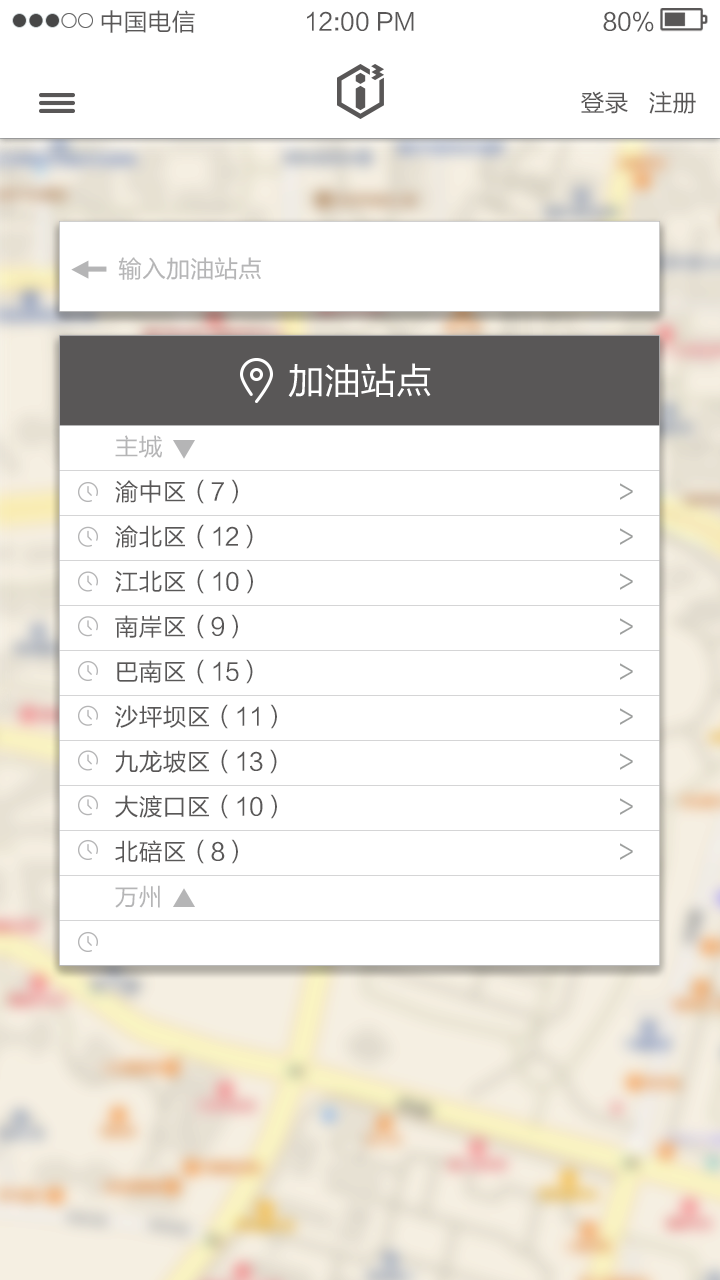
<style>
.page{position:relative;width:720px;height:1280px;background:#ffffff}
.page>*{position:absolute;margin:0}
.t1{font:24px "FZLTHK--GBK1-0";color:#595757}
.t2{font:24px/45px "FZLTHK--GBK1-0";color:#595757}
.t3{font:24px/45px "FZLTHK--GBK1-0";color:#b5b5b6}
.t4{font:24px/45px "FZLTHK--GBK1-0";color:#9d9f9e}
</style>
<div class="page">
<p class="t1" style="left:101px;top:10px;width:94px;height:23px">中国电信</p>
<p class="t1" style="left:307px;top:11px;width:107px;height:20px">12:00 PM</p>
<p class="t1" style="left:603px;top:11px;width:51px;height:21px">80%</p>
<p class="t1" style="left:581px;top:91px;width:115px;height:23px">登录   注册</p>
<p class="t2" style="left:115px;top:435px;width:518px;height:473px"><span class="t3">主城<br></span>渝中区（7）           <span class="t4">&gt;<br></span>渝北区（12）          <span class="t4">&gt;<br></span>江北区（10）          <span class="t4">&gt;<br></span>南岸区（9）           <span class="t4">&gt;<br></span>巴南区（15）          <span class="t4">&gt;<br></span>沙坪坝区（11）          <span class="t4">&gt;<br></span>九龙坡区（13）          <span class="t4">&gt;<br></span>大渡口区（10）          <span class="t4">&gt;<br></span>北碚区（8）           <span class="t4">&gt;<br></span><span class="t3">万州</span></p>
</div>
